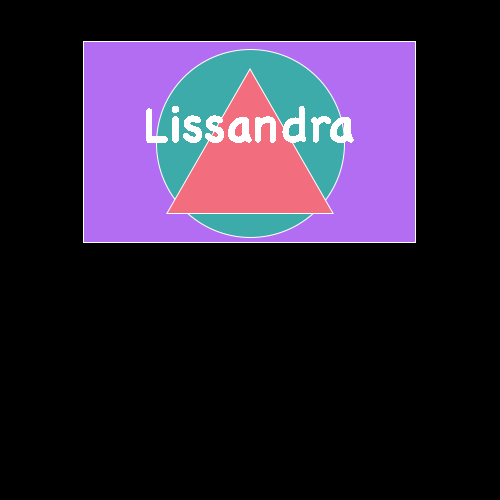
<style>
.page{position:relative;width:500px;height:500px;background:#000000}
.page>*{position:absolute;margin:0}
.t1{font:48px "ChalkboardSE-Bold";color:#ffffff}
</style>
<div class="page">
<p class="t1" style="left:146px;top:106px;width:208px;height:37px">Lissandra</p>
</div>
